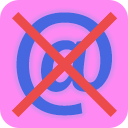
<style>
.page{position:relative;width:128px;height:128px;background:#ff89f3}
.page>*{position:absolute;margin:0}
.t1{font:108px "Candara-Bold";letter-spacing:0.05em;color:#4667e0}
</style>
<div class="page">
<p class="t1" style="left:16px;top:12px;width:96px;height:104px">@</p>
</div>
